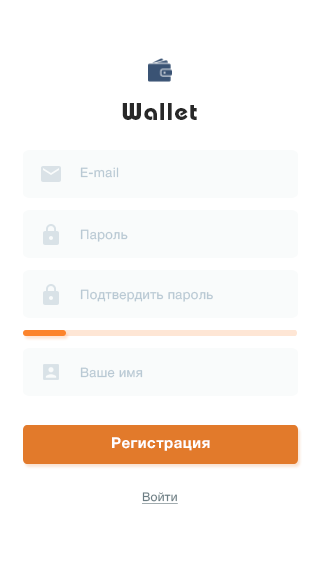
<style>
.page{position:relative;width:320px;height:568px;background:#ffffff}
.page>*{position:absolute;margin:0}
.t1{font:24px "BauhausC-Bold";letter-spacing:0.06em;color:#282828}
.t2{font:13px "HelveticaNeueCyr-Roman";letter-spacing:0.03em;color:#b9c9d4}
.t3{font:15px "HelveticaNeueCyr-Bold";letter-spacing:0.03em;color:#ffffff}
.t4{font:12px "HelveticaNeueCyr-Roman";letter-spacing:0.03em;color:#6b7d83;text-decoration:underline}
</style>
<div class="page">
<p class="t1" style="left:122px;top:103px;width:75px;height:17px">Wallet</p>
<p class="t2" style="left:80px;top:167px;width:39px;height:11px">E-mail</p>
<p class="t2" style="left:80px;top:229px;width:48px;height:13px">Пароль</p>
<p class="t2" style="left:80px;top:289px;width:133px;height:13px">Подтвердить пароль</p>
<p class="t2" style="left:80px;top:367px;width:63px;height:11px">Ваше имя</p>
<p class="t3" style="left:112px;top:437px;width:98px;height:14px">Регистрация</p>
<p class="t4" style="left:142px;top:492px;width:36px;height:12px">Войти</p>
</div>
